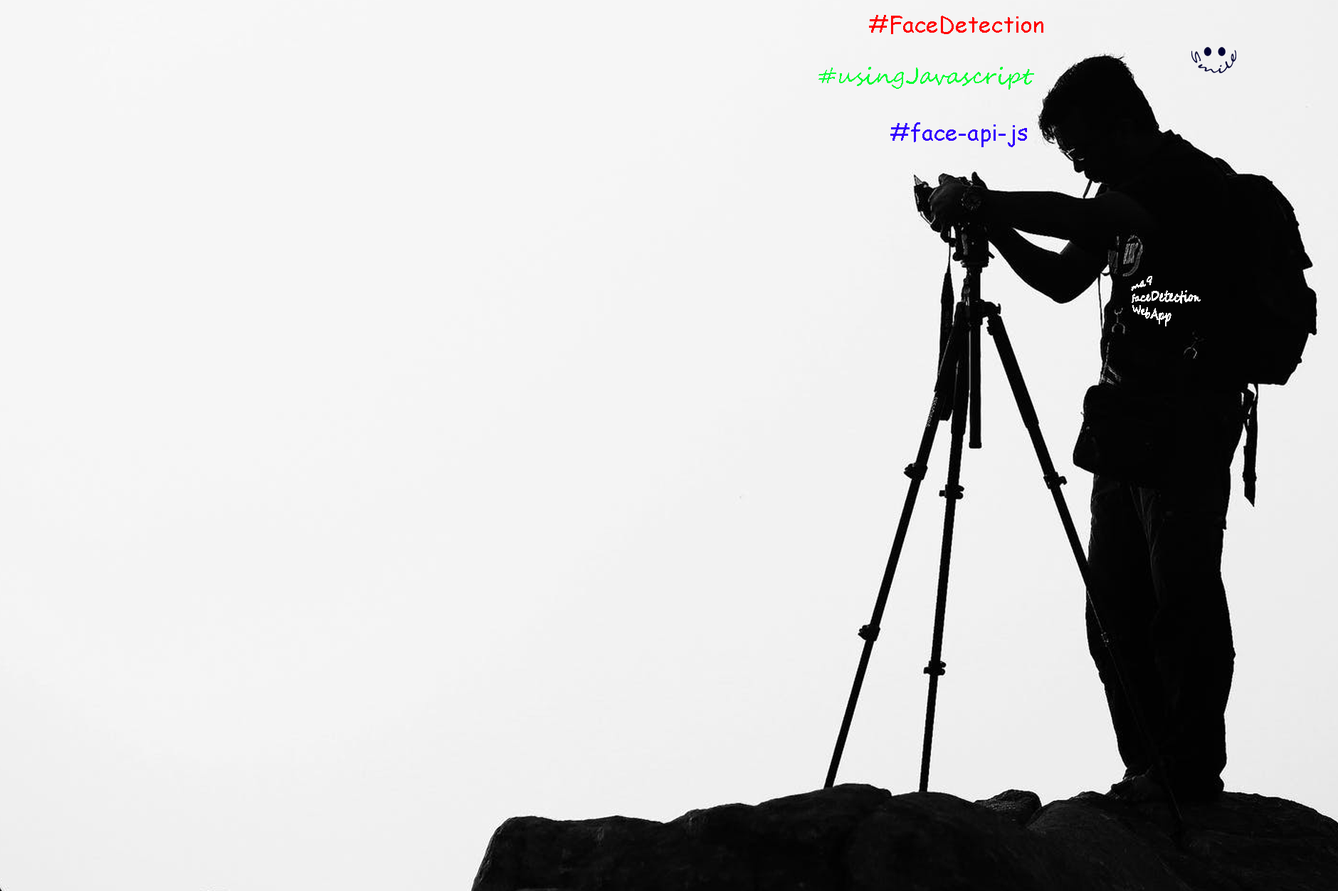
<style>
.page{position:relative;width:1338px;height:891px;background:#f6f6f6}
.page>*{position:absolute;margin:0}
.t1{font:23px "ComicSansMS";color:#ff0000}
.t2{font:23px "SegoeScript";color:#00ff33}
.t3{font:23px "ComicSansMS";color:#3300ff}
.t4{font:9.5px "SegoeScript";color:#ffffff}
</style>
<div class="page">
<p class="t1" style="left:869px;top:15px;width:174px;height:19px">#FaceDetection</p>
<p class="t2" style="left:818px;top:67px;width:216px;height:23px">#usingJavascript</p>
<p class="t3" style="left:890px;top:122px;width:137px;height:25px">#face-api-js</p>
<p class="t4" style="left:1131px;top:276px;width:69px;height:51px">ma9<br>faceDetection<br>WebApp</p>
</div>
